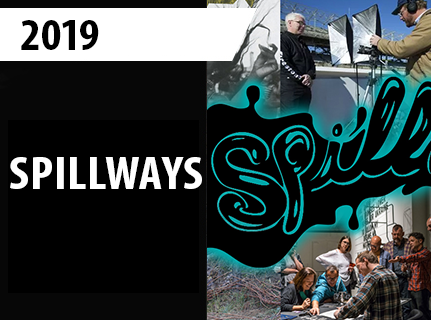
<style>
.page{position:relative;width:431px;height:320px;background:#000000}
.page>*{position:absolute;margin:0}
.t1{font:46px "MyriadPro-BoldCond";letter-spacing:-0.025em;color:#000000;scale:1.05 1}
.t2{font:46px "MyriadPro-BoldCond";color:#000000;scale:1.05 1}
.t3{font:46px "MyriadPro-BoldCond";letter-spacing:-0.05em;color:#000000;scale:1.05 1}
.t4{font:46px "MyriadPro-BoldCond";letter-spacing:0.01em;color:#fefefe;scale:1.11 1}
</style>
<div class="page">
<p class="t1" style="left:21px;top:20px;width:78px;height:30px"><span class="t2">2</span>01<span class="t3">9</span></p>
<p class="t4" style="left:10px;top:157px;width:192px;height:32px">SPILLWAYS</p>
</div>
